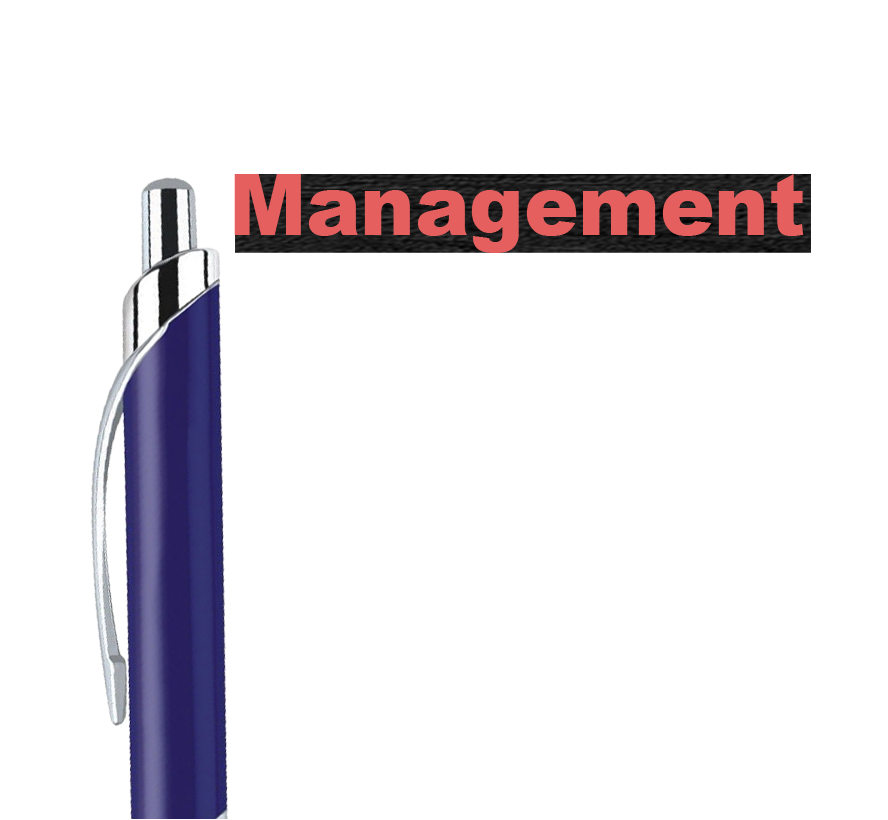
<style>
.page{position:relative;width:888px;height:820px;background:#ffffff}
.page>*{position:absolute;margin:0}
.t1{font:84.8px "Arial-Black";color:#e55f5f;scale:0.96 1}
</style>
<div class="page">
<p class="t1" style="left:234px;top:174px;width:570px;height:79px">Management</p>
</div>
